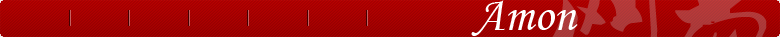
<style>
.page{position:relative;width:780px;height:37px}
.page>*{position:absolute;margin:0}
.t1{font:48px "MonotypeCorsiva";color:#ffffff}
</style>
<div class="page">
<p class="t1" style="left:471px;top:0px;width:107px;height:36px">Amon</p>
</div>
